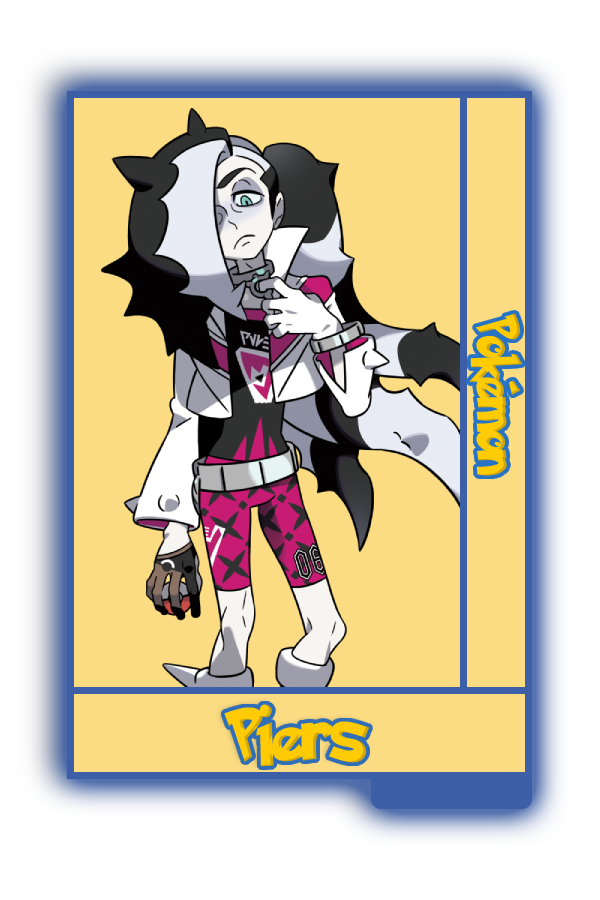
<style>
.page{position:relative;width:600px;height:900px;background:#fbdc83}
.page>*{position:absolute;margin:0}
.t1{font:48.8px "PokemonSolidNormal";color:#ffcb05;scale:0.8 1}
.t2{font:60.1px "PokemonSolidNormal";color:#ffcb05;scale:0.96 1}
</style>
<div class="page">
<p class="t1" style="left:469px;top:313px;width:54px;height:163px;rotate:90deg">Pokémon</p>
<p class="t2" style="left:224px;top:704px;width:146px;height:63px">Piers</p>
</div>
